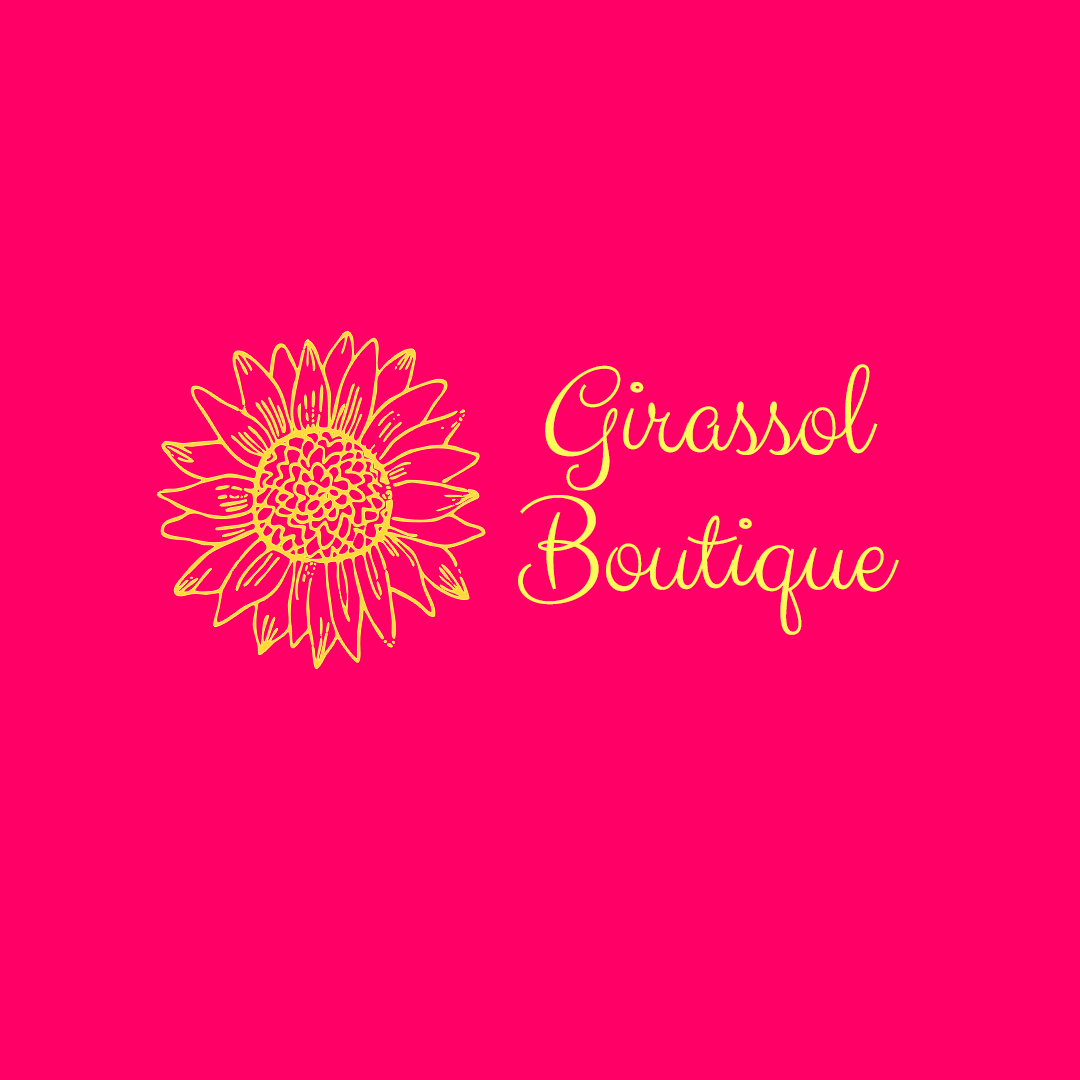
<style>
.page{position:relative;width:1080px;height:1080px;background:#ff0066}
.page>*{position:absolute;margin:0}
.t1{font:135.6px/136.3px "ClickerScript-Regular";color:#fdfa5c}
</style>
<div class="page">
<p class="t1" style="left:518px;top:364px;width:381px;height:271px;text-align:center">Girassol<br>Boutique</p>
</div>
